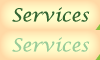
<style>
.page{position:relative;width:100px;height:60px}
.page>*{position:absolute;margin:0}
.t1{font:18px "LucidaCalligraphy-Italic";color:#336633}
.t2{font:18px "LucidaCalligraphy-Italic";color:#99cc99}
</style>
<div class="page">
<p class="t1" style="left:12px;top:7px;width:78px;height:15px">Services</p>
<p class="t2" style="left:12px;top:37px;width:78px;height:15px">Services</p>
</div>
